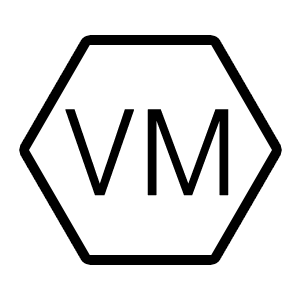
<style>
.page{position:relative;width:300px;height:300px;background:#ffffff}
.page>*{position:absolute;margin:0}
.t1{font:117.9px "Helvetica-Light";color:#000000;font-weight:bold}
</style>
<div class="page">
<p class="t1" style="left:65px;top:109px;width:164px;height:87px">VM</p>
</div>
